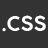
<style>
.page{position:relative;width:48px;height:48px;background:#333333}
.page>*{position:absolute;margin:0}
.t1{font:20px "CocoGothic-Bold";color:#ffffff}
</style>
<div class="page">
<p class="t1" style="left:2px;top:15px;width:44px;height:17px">.CSS</p>
</div>
